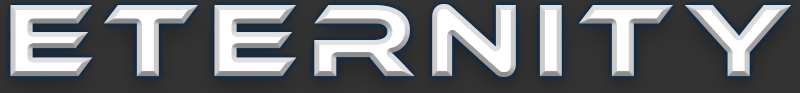
<style>
.page{position:relative;width:800px;height:93px}
.page>*{position:absolute;margin:0}
.t1{font:104.7px "EthnocentricRg-Regular";letter-spacing:0.1em}
</style>
<div class="page">
<p class="t1" style="left:10px;top:4px;width:782px;height:73px">eternity</p>
</div>
